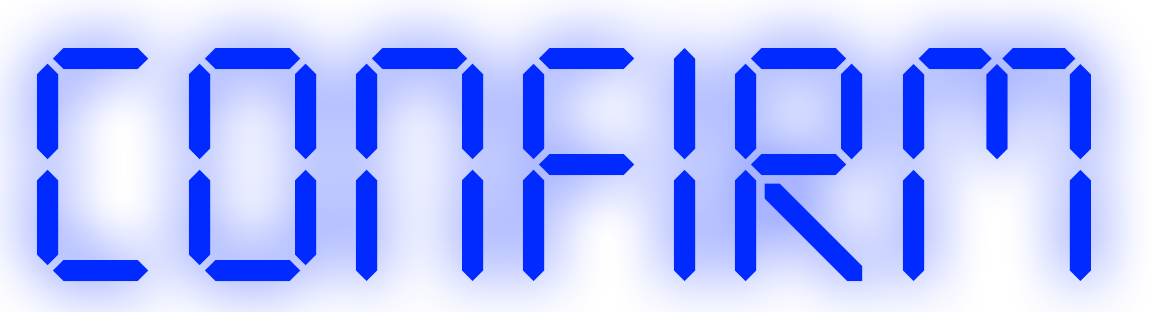
<style>
.page{position:relative;width:1152px;height:312px}
.page>*{position:absolute;margin:0}
.t1{font:333px "SevenSegmentRegular";color:#002aff}
</style>
<div class="page">
<p class="t1" style="left:36px;top:48px;width:1055px;height:234px">confirm</p>
</div>
